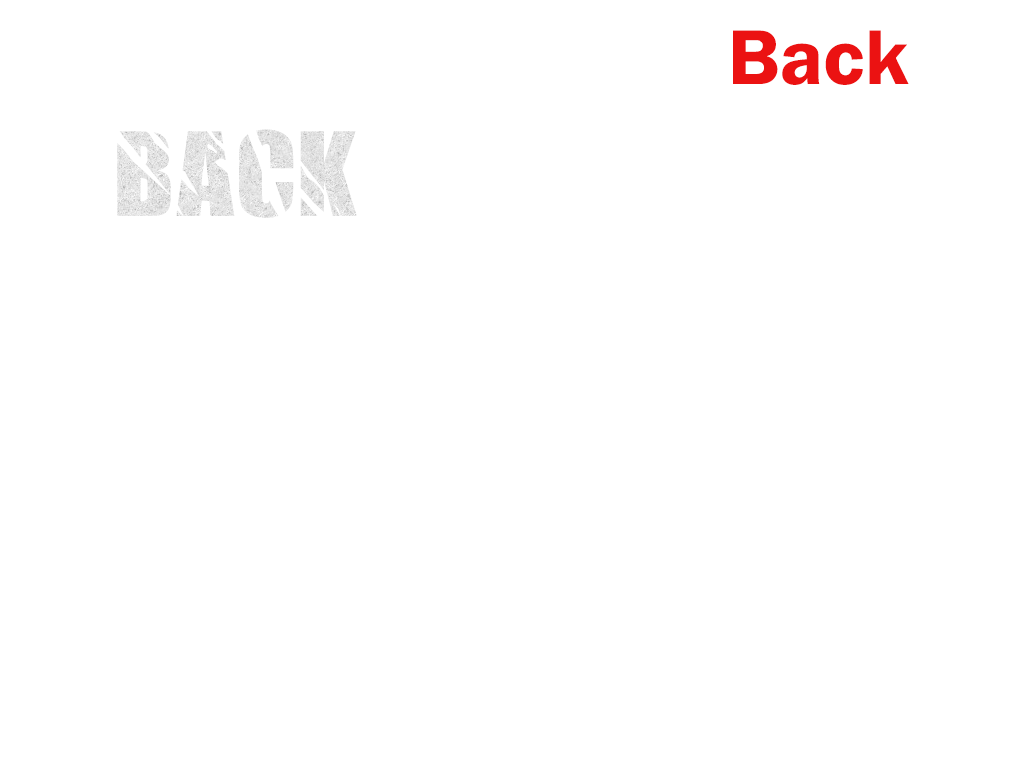
<style>
.page{position:relative;width:1024px;height:768px;background:#ffffff}
.page>*{position:absolute;margin:0}
.t1{font:80px "FranklinGothic-Demi";color:#eb1212}
.t2{font:80px "Insomnia-Regular";color:#e3e3e3}
</style>
<div class="page">
<p class="t1" style="left:733px;top:30px;width:176px;height:55px">Back</p>
<p class="t2" style="left:117px;top:129px;width:240px;height:89px">Back</p>
</div>
